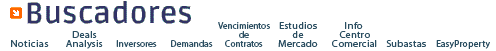
<style>
.page{position:relative;width:496px;height:51px;background:#ffffff}
.page>*{position:absolute;margin:0}
.t1{font:9px/9px "MyriadPro-Regular";letter-spacing:0.01em;color:#2b4e61}
.t2{font:9px/9px "MyriadPro-Regular";letter-spacing:0.025em;color:#2b4e61;scale:1.15 1}
.t3{font:9px "MyriadPro-Regular";letter-spacing:0.025em;color:#2b4e61;scale:1.15 1}
.t4{font:9px "MyriadPro-Regular";letter-spacing:0.05em;color:#2b4e61;scale:1.15 1}
.t5{font:9px "MyriadPro-Regular";letter-spacing:0.025em;color:#2b4e61}
.t6{font:9px "MyriadPro-Regular";letter-spacing:0.025em;color:#2b4e61;scale:1.05 1}
</style>
<div class="page">
<p class="t1" style="left:218px;top:22px;width:52px;height:25px;text-align:center">Vencimientos<br>de<br>Contratos</p>
<p class="t2" style="left:278px;top:22px;width:40px;height:25px;text-align:center">Estudios<br>de<br>Mercado</p>
<p class="t3" style="left:345px;top:22px;width:18px;height:7px">Info</p>
<p class="t4" style="left:11px;top:40px;width:38px;height:7px">Noticias</p>
<p class="t2" style="left:66px;top:31px;width:37px;height:18px;text-align:center">Deals<br>Analysis</p>
<p class="t5" style="left:116px;top:40px;width:41px;height:7px">Inversores</p>
<p class="t5" style="left:171px;top:40px;width:42px;height:7px">Demandas</p>
<p class="t2" style="left:332px;top:31px;width:45px;height:16px;text-align:center">Centro<br>Comercial</p>
<p class="t3" style="left:386px;top:40px;width:40px;height:7px">Subastas</p>
<p class="t6" style="left:436px;top:40px;width:54px;height:9px">EasyProperty</p>
</div>
